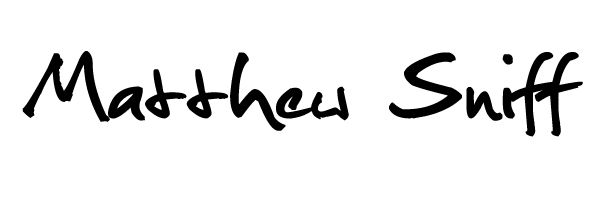
<style>
.page{position:relative;width:600px;height:200px;background:#ffffff}
.page>*{position:absolute;margin:0}
.t1{font:122px "Christopherhand";color:#000000;font-weight:bold}
</style>
<div class="page">
<p class="t1" style="left:22px;top:51px;width:561px;height:86px">Matthew Sniff</p>
</div>
